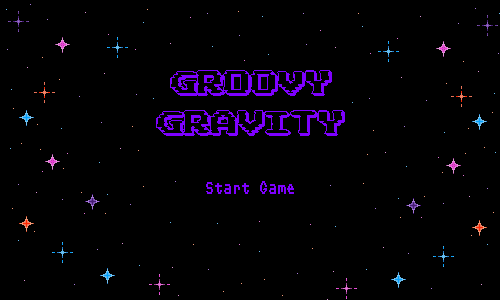
<style>
.page{position:relative;width:500px;height:300px;background:#000000}
.page>*{position:absolute;margin:0}
.t1{font:33.5px "CCPixelArcade-Cartridge";color:#7e00ff}
.t2{font:18px "Receipt-Narrow";color:#7e00ff}
</style>
<div class="page">
<p class="t1" style="left:156px;top:70px;width:189px;height:66px;text-align:center">Groovy Gravity</p>
<p class="t2" style="left:206px;top:181px;width:88px;height:13px">Start Game</p>
</div>
